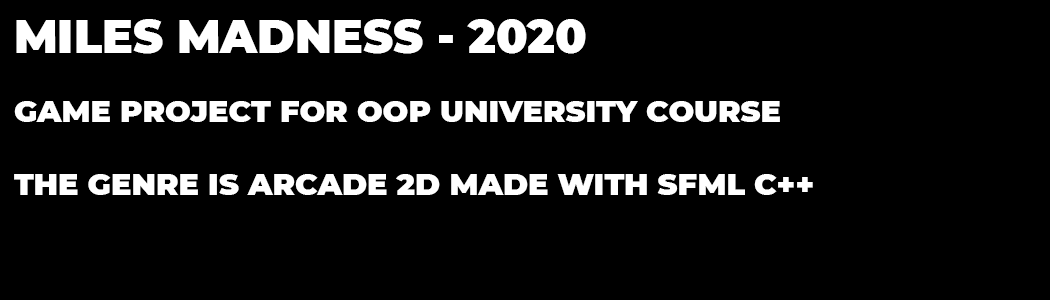
<style>
.page{position:relative;width:1050px;height:300px;background:#000000}
.page>*{position:absolute;margin:0}
.t1{font:45.8px "Montserrat-Black";color:#ffffff}
.t2{font:30.4px "Montserrat-Black";color:#ffffff}
</style>
<div class="page">
<p class="t1" style="left:16px;top:19px;width:570px;height:35px">MILES MADNESS - 2020</p>
<p class="t2" style="left:14px;top:101px;width:799px;height:94px">GAME PROJECT FOR OOP UNIVERSITY COURSE<br><br>THE GENRE IS ARCADE 2D MADE WITH SFML C++</p>
</div>
